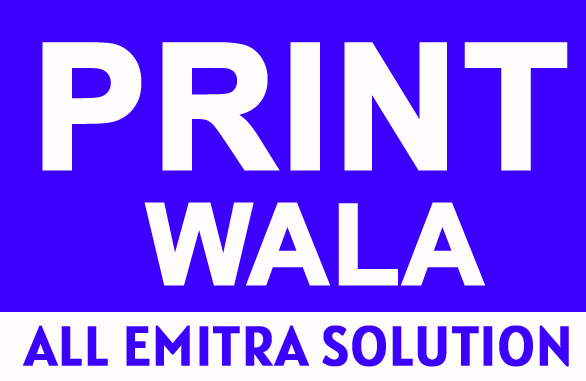
<style>
.page{position:relative;width:586px;height:381px;background:#3c00ff}
.page>*{position:absolute;margin:0}
.t1{font:172.4px "Arial-BoldMT";color:#fffcfc;font-weight:bold}
.t2{font:111.5px "Arial-BoldMT";color:#fffcfc;font-weight:bold}
.t3{font:55.8px "Alatsi-Regular";color:#3c00ff;font-weight:bold}
</style>
<div class="page">
<p class="t1" style="left:42px;top:42px;width:526px;height:129px">PRINT</p>
<p class="t2" style="left:144px;top:202px;width:342px;height:84px">WALA</p>
<p class="t3" style="left:23px;top:325px;width:546px;height:42px">ALL EMITRA SOLUTION</p>
</div>
